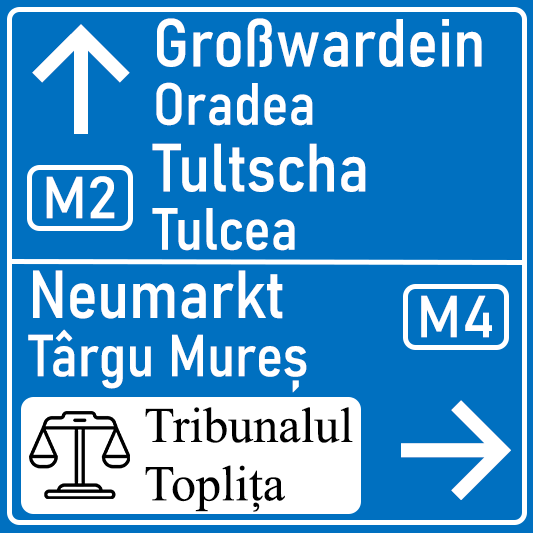
<style>
.page{position:relative;width:533px;height:533px;background:#0070c0}
.page>*{position:absolute;margin:0}
.t1{font:150px "Inter-Medium";color:#ffffff}
.t2{font:66.7px/66.7px "Bahnschrift-SemiCondensed";color:#ffffff}
.t3{font:58.3px/58.3px "Bahnschrift-SemiCondensed";color:#ffffff}
.t4{font:58.3px "Bahnschrift";color:#ffffff}
.t5{font:66.7px/58.3px "Bahnschrift-SemiCondensed";color:#ffffff}
.t6{font:50px/58.3px "TimesNewRomanPSMT";color:#000000}
</style>
<div class="page">
<p class="t1" style="left:32px;top:24px;width:98px;height:110px">↑</p>
<p class="t2" style="left:152px;top:18px;width:330px;height:233px">Großwardein<br><span class="t3">Oradea<br></span>Tultscha<br><span class="t3">Tulcea</span></p>
<p class="t4" style="left:46px;top:176px;width:69px;height:43px">M2</p>
<p class="t3" style="left:28px;top:270px;width:279px;height:123px"><span class="t5">Neumarkt<br></span>Târgu Mureș</p>
<p class="t4" style="left:421px;top:295px;width:71px;height:43px">M4</p>
<p class="t1" style="left:401px;top:400px;width:110px;height:100px">→</p>
<p class="t6" style="left:145px;top:407px;width:208px;height:105px">Tribunalul<br>Toplița</p>
</div>
